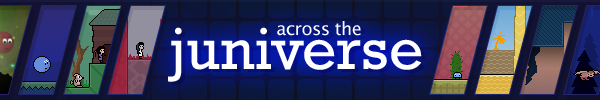
<style>
.page{position:relative;width:600px;height:100px}
.page>*{position:absolute;margin:0}
.t1{font:60px "RockwellStd";color:#ffffff}
.t2{font:18px "LucidaSansUnicode";letter-spacing:-0.025em;color:#ffffff}
</style>
<div class="page">
<p class="t1" style="left:168px;top:27px;width:254px;height:55px">juniverse</p>
<p class="t2" style="left:277px;top:21px;width:84px;height:15px">across the</p>
</div>
